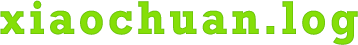
<style>
.page{position:relative;width:358px;height:45px;background:#ffffff}
.page>*{position:absolute;margin:0}
.t1{font:48px "Rockwell-Bold";letter-spacing:0.1em;color:#85df08;scale:0.94 1}
</style>
<div class="page">
<p class="t1" style="left:0px;top:0px;width:358px;height:45px">xiaochuan.log</p>
</div>
